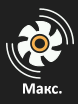
<style>
.page{position:relative;width:78px;height:104px;background:#202020}
.page>*{position:absolute;margin:0}
.t1{font:12px "Calibri-Bold";color:#ffffff}
</style>
<div class="page">
<p class="t1" style="left:23px;top:83px;width:39px;height:11px">Макс.</p>
</div>
